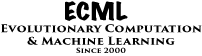
<style>
.page{position:relative;width:202px;height:56px;background:#ffffff}
.page>*{position:absolute;margin:0}
.t1{font:10.4px "TrajanPro3-Bold";color:#000000;scale:1.14 1}
.t2{font:22.3px "MarkerFelt-Wide";color:#000000;scale:1.14 1}
.t3{font:6.9px "TrajanPro3-Bold";color:#000000;scale:1.14 1}
</style>
<div class="page">
<p class="t1" style="left:1px;top:1px;width:201px;height:52px;text-align:center"><span class="t2">ECML <br></span>Evolutionary Computation<br>&amp; Machine Learning<br><span class="t3">Since 2000</span></p>
</div>
